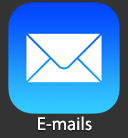
<style>
.page{position:relative;width:128px;height:138px;background:#333333}
.page>*{position:absolute;margin:0}
.t1{font:18.6px "MyriadPro-Regular";color:#ffffff}
</style>
<div class="page">
<p class="t1" style="left:38px;top:116px;width:54px;height:15px">E-mails</p>
</div>
